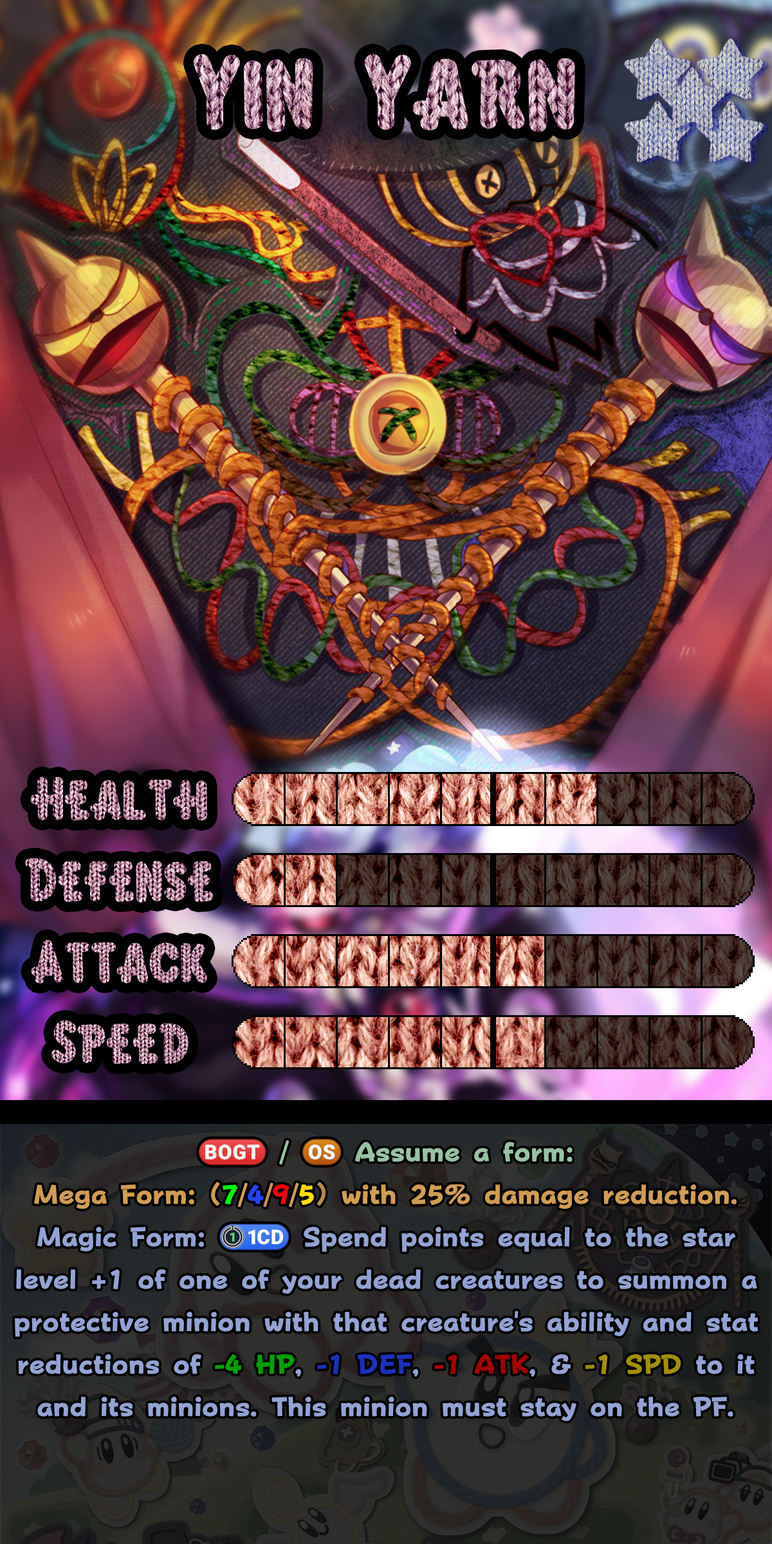
<style>
.page{position:relative;width:772px;height:1544px}
.page>*{position:absolute;margin:0}
.t1{font:165.4px "KirbyClassic"}
.t2{font:92.7px "KirbyClassic"}
.t3{font:93.3px "KirbyClassic"}
.t4{font:45.7px/42.5px "FOTPopHappinessStrp-ExtraBold";color:#93a3d5}
.t5{font:45.7px/42.5px "stoogedings-Regular";letter-spacing:0.5em;color:#98c2a3}
.t6{font:45.7px/42.5px "FOTPopHappinessStrp-ExtraBold";letter-spacing:0.5em;color:#98c2a3}
.t7{font:45.7px/42.5px "stoogedings-Regular";color:#98c2a3}
.t8{font:45.7px/42.5px "FOTPopHappinessStrp-ExtraBold";color:#98c2a3}
.t9{font:45.7px/42.5px "FOTPopHappinessStrp-ExtraBold";color:#d29c52}
.t10{font:45.7px/42.5px "FOTPopHappinessStrp-ExtraBold";color:#00ff00}
.t11{font:45.7px/42.5px "FOTPopHappinessStrp-ExtraBold";color:#2443ff}
.t12{font:45.7px/42.5px "FOTPopHappinessStrp-ExtraBold";color:#c7934d}
.t13{font:45.7px/42.5px "FOTPopHappinessStrp-ExtraBold";color:#ff0000}
.t14{font:45.7px/42.5px "FOTPopHappinessStrp-ExtraBold";color:#ffde00}
.t15{font:45.7px/42.5px "FOTPopHappinessStrp-ExtraBold";color:#b98947}
.t16{font:45.7px/42.5px "stoogedings-Regular";color:#93a3d5}
.t17{font:45.7px/42.5px "FOTPopHappinessStrp-ExtraBold";color:#00a300}
.t18{font:45.7px/42.5px "FOTPopHappinessStrp-ExtraBold";color:#1b32bd}
.t19{font:45.7px/42.5px "FOTPopHappinessStrp-ExtraBold";color:#a30000}
.t20{font:45.7px/42.5px "FOTPopHappinessStrp-ExtraBold";color:#a38e00}
</style>
<div class="page">
<p class="t1" style="left:194px;top:54px;width:381px;height:79px">Yin Yarn</p>
<p class="t2" style="left:30px;top:777px;width:178px;height:44px">Health</p>
<p class="t3" style="left:25px;top:858px;width:188px;height:45px">Defense</p>
<p class="t2" style="left:31px;top:939px;width:176px;height:45px">Attack</p>
<p class="t2" style="left:51px;top:1021px;width:138px;height:43px">Speed</p>
<p class="t4" style="left:15px;top:1139px;width:744px;height:282px;text-align:center"><span class="t5">(BOGT)</span><span class="t6">/</span><span class="t7">(OS)</span><span class="t8"> Assume a form:<br></span><span class="t9">Mega Form: (</span><span class="t10">7</span><span class="t9">/</span><span class="t11">4</span><span class="t12">/</span><span class="t13">9</span><span class="t9">/</span><span class="t14">5</span><span class="t15">) </span><span class="t9">with 25% damage reduction.<br></span>Magic Form: <span class="t16">(1CD)</span> Spend points equal to the star level +1 of one of your dead creatures to summon a protective minion with that creature's ability and stat reductions of <span class="t17">-4 HP</span>, <span class="t18">-1 DEF</span>, <span class="t19">-1 ATK</span>, &amp; <span class="t20">-1 SPD</span> to it and its minions. This minion must stay on the PF.</p>
</div>
